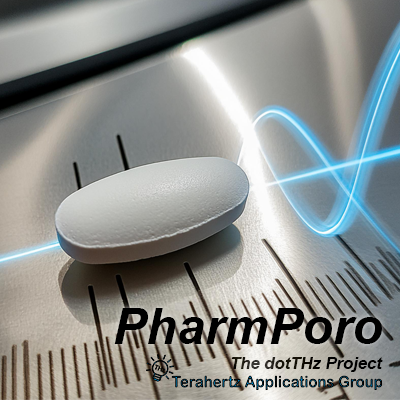
<style>
.page{position:relative;width:400px;height:400px}
.page>*{position:absolute;margin:0}
.t1{font:50px "Arial-BoldItalicMT";color:#000000}
.t2{font:16.7px "Arial-BoldItalicMT";color:#000000}
</style>
<div class="page">
<p class="t1" style="left:114px;top:308px;width:268px;height:36px">PharmPoro</p>
<p class="t2" style="left:231px;top:357px;width:152px;height:15px">The dotTHz Project</p>
</div>
